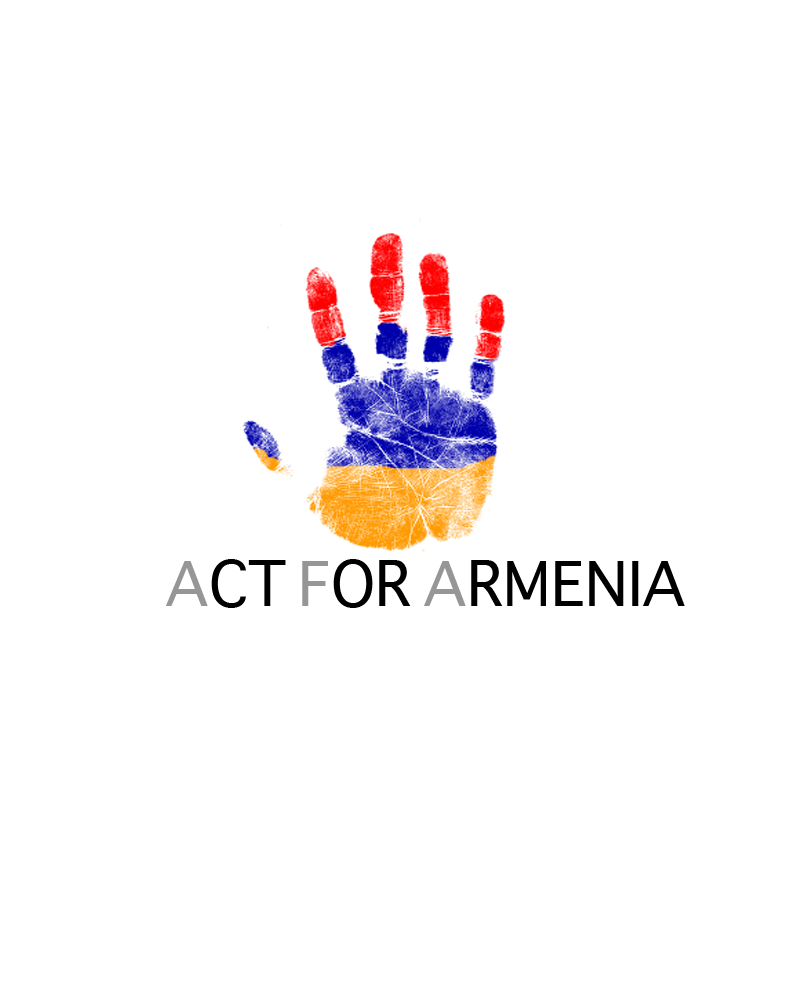
<style>
.page{position:relative;width:800px;height:1000px;background:#ffffff}
.page>*{position:absolute;margin:0}
.t1{font:60px "Sathu";color:#000000}
.t2{font:60px "Sathu";color:#969696}
</style>
<div class="page">
<p class="t1" style="left:166px;top:559px;width:519px;height:49px"><span class="t2">A</span>CT <span class="t2">F</span>OR <span class="t2">A</span>RMENIA</p>
</div>
